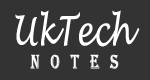
<style>
.page{position:relative;width:150px;height:80px;background:#333333}
.page>*{position:absolute;margin:0}
.t1{font:40.3px "LucidaHandwriting-Italic";color:#ffffff;scale:0.73 1}
.t2{font:20.2px "Algerian";color:#ffffff;scale:0.73 1}
.t3{font:20.2px "Algerian";color:#000000;scale:0.73 1}
</style>
<div class="page">
<p class="t1" style="left:15px;top:10px;width:125px;height:37px">UkTech</p>
<p class="t2" style="left:30px;top:54px;width:89px;height:15px"><span class="t3">  </span> n   o   t   e   s</p>
</div>
